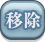
<style>
.page{position:relative;width:45px;height:42px}
.page>*{position:absolute;margin:0}
.t1{font:18px "RyuminPr6N-ExBold";color:#f1ebeb}
</style>
<div class="page">
<p class="t1" style="left:5px;top:11px;width:36px;height:18px">移除</p>
</div>
